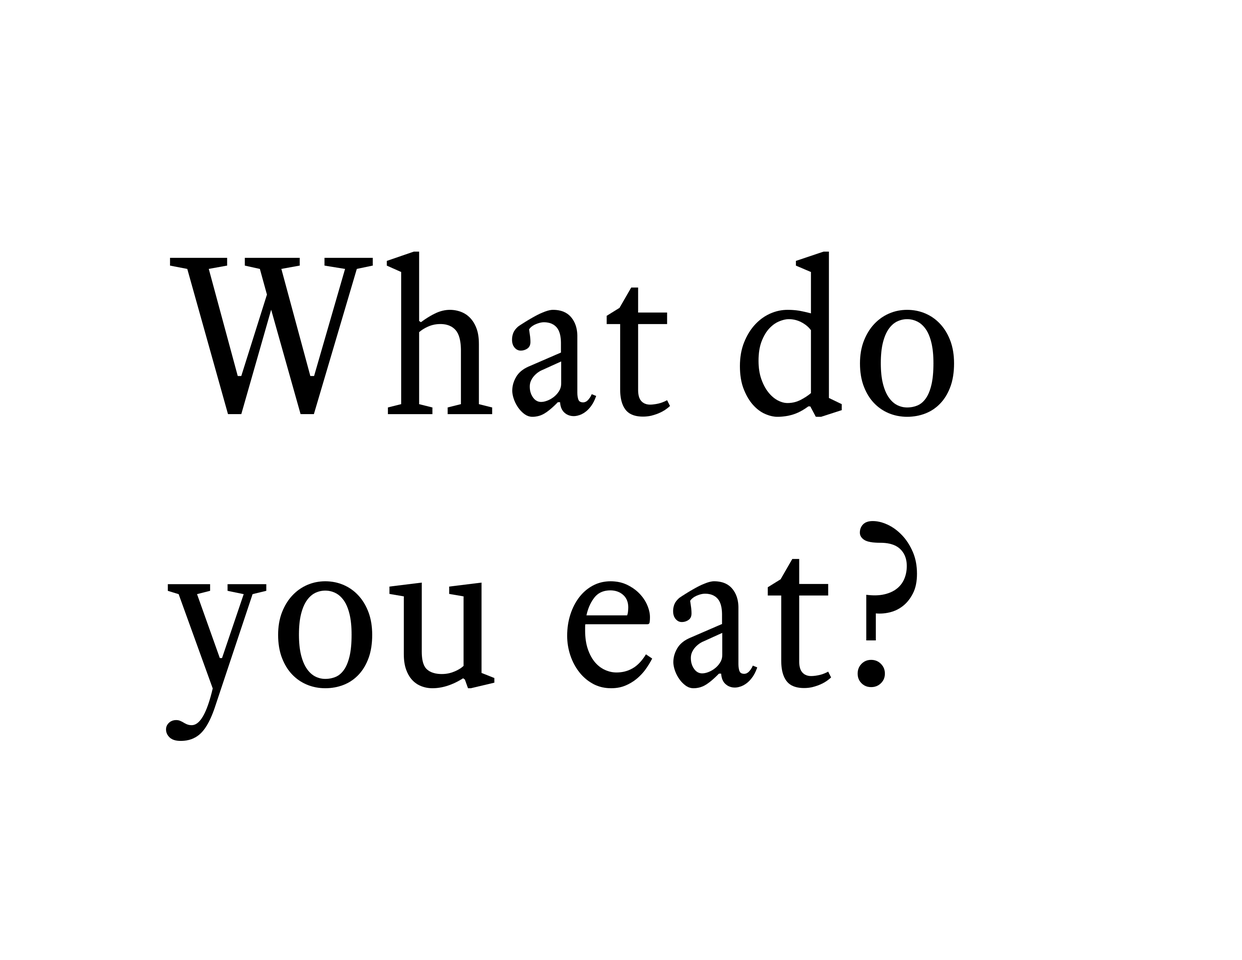
<style>
.page{position:relative;width:1242px;height:960px;background:#ffffff}
.page>*{position:absolute;margin:0}
.t1{font:221.2px/271.3px "EquityTextB";letter-spacing:0.025em;color:#000000}
</style>
<div class="page">
<p class="t1" style="left:166px;top:251px;width:788px;height:490px;text-align:justify">What do<br>you eat?</p>
</div>
